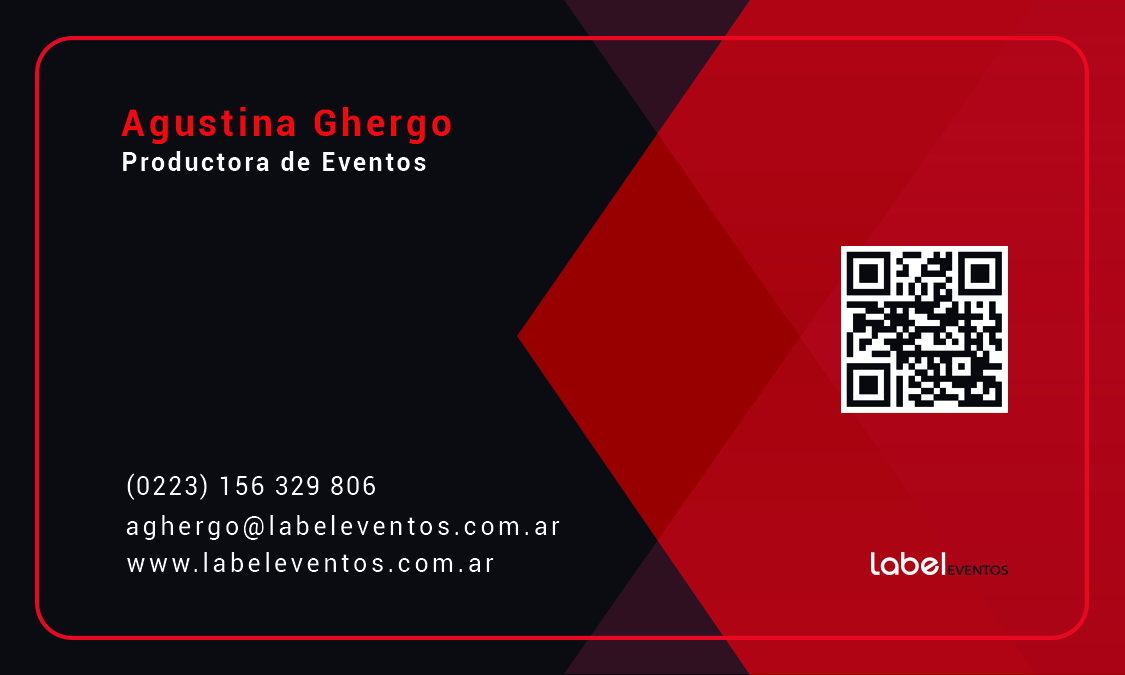
<style>
.page{position:relative;width:1125px;height:675px;background:#0b0b12}
.page>*{position:absolute;margin:0}
.t1{font:37.5px "Roboto-Bold";letter-spacing:0.1em;color:#f5070d}
.t2{font:25px "Roboto-Bold";letter-spacing:0.1em;color:#fbfcfd}
.t3{font:25px "Roboto-Regular";letter-spacing:0.075em;color:#fbfdfd}
.t4{font:25px "Roboto-Regular";letter-spacing:0.14em;color:#fbfcfd}
</style>
<div class="page">
<p class="t1" style="left:121px;top:107px;width:330px;height:37px">Agustina Ghergo</p>
<p class="t2" style="left:123px;top:151px;width:303px;height:20px">Productora de Eventos</p>
<p class="t3" style="left:127px;top:473px;width:248px;height:27px">(0223) 156 329 806</p>
<p class="t4" style="left:126px;top:515px;width:434px;height:25px">aghergo@labeleventos.com.ar</p>
<p class="t4" style="left:127px;top:552px;width:367px;height:20px">www.labeleventos.com.ar</p>
</div>
